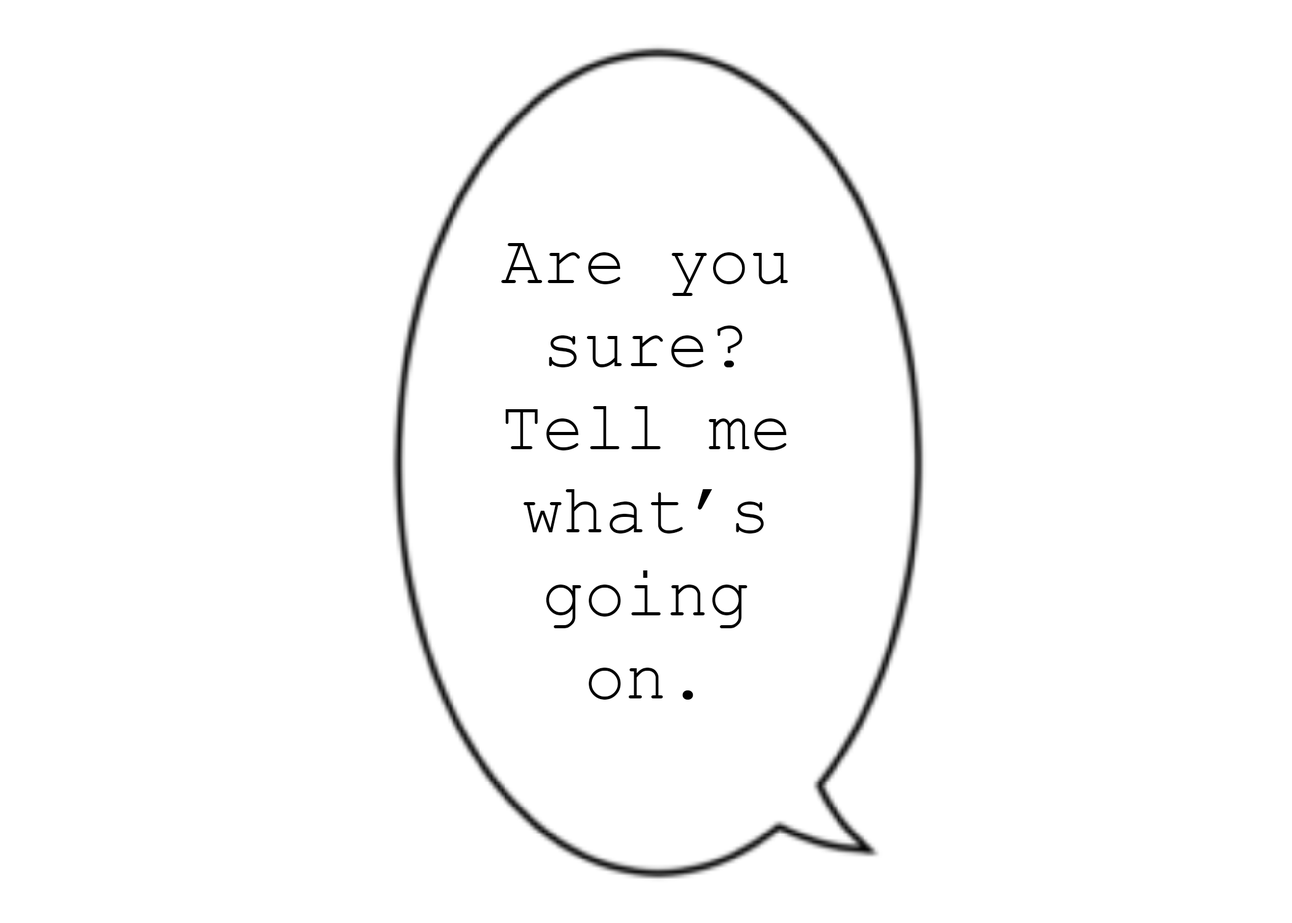
<style>
.page{position:relative;width:1292px;height:923px;background:#ffffff}
.page>*{position:absolute;margin:0}
.t1{font:69.2px "CourierNewPSMT";color:#000000}
</style>
<div class="page">
<p class="t1" style="left:501px;top:243px;width:287px;height:457px;text-align:center">Are you sure? Tell me what’s going on.</p>
</div>
